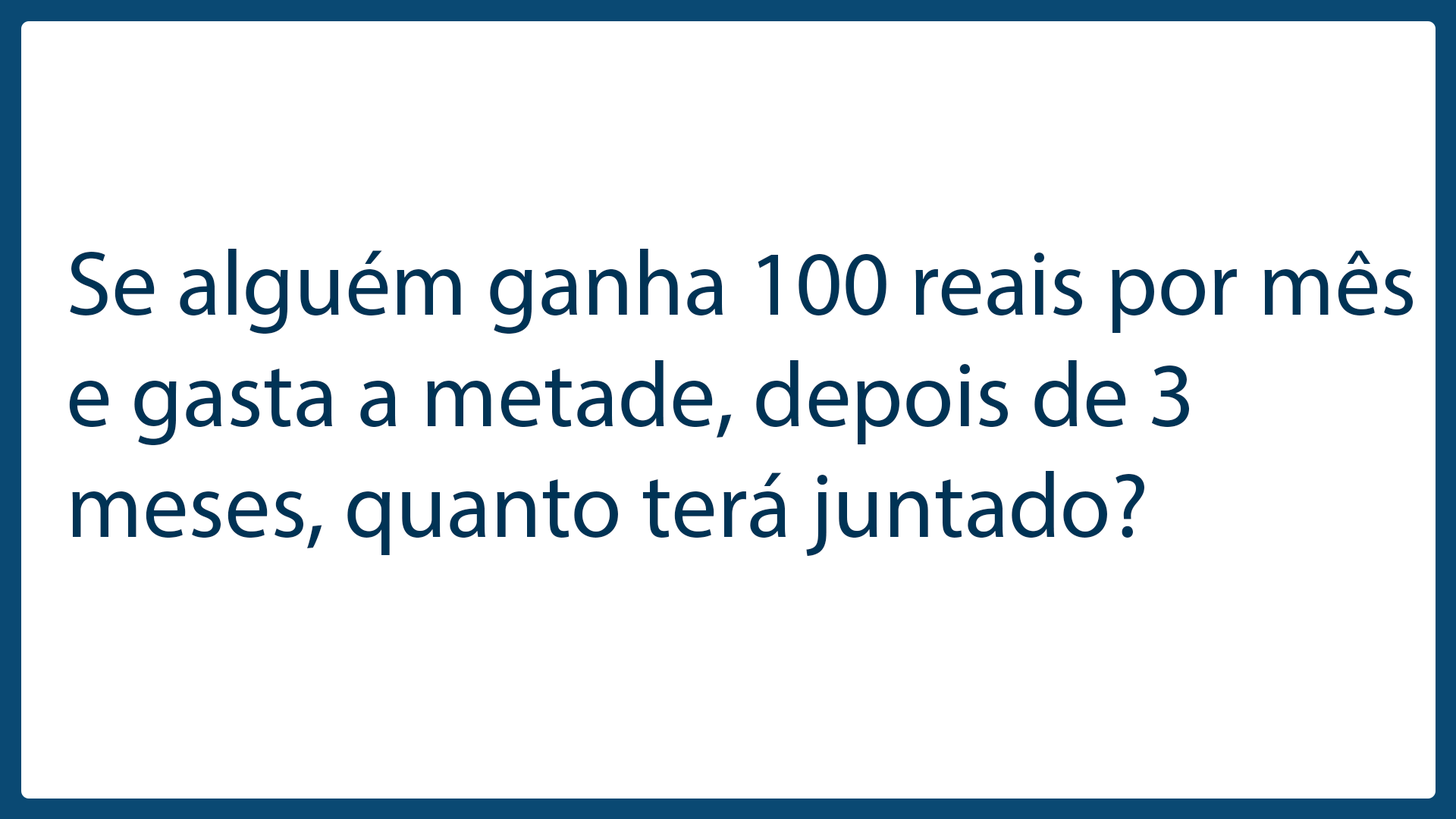
<style>
.page{position:relative;width:1456px;height:819px;background:#ffffff}
.page>*{position:absolute;margin:0}
.t1{font:92.6px "MyriadPro-Regular";color:#003355}
</style>
<div class="page">
<p class="t1" style="left:69px;top:249px;width:1344px;height:307px">Se alguém ganha 100 reais por mês e gasta a metade, depois de 3 meses, quanto terá juntado?</p>
</div>
